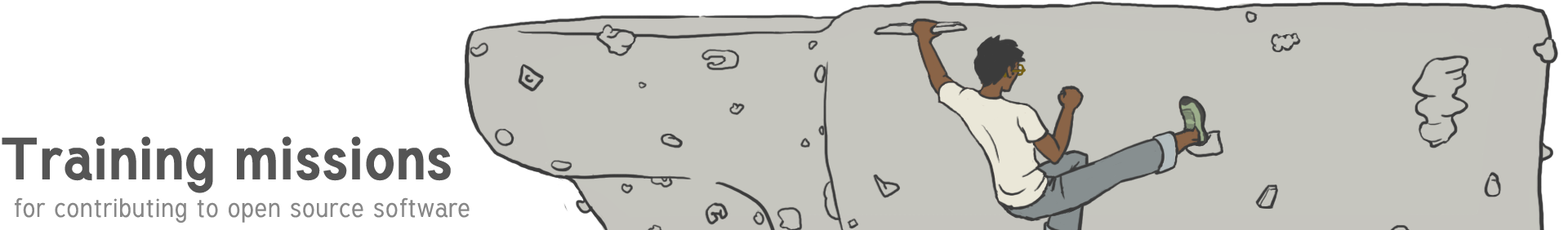
<style>
.page{position:relative;width:1568px;height:230px;background:#c6c6bf}
.page>*{position:absolute;margin:0}
.t1{font:58.8px "Tuffy-Bold";color:#555555}
.t2{font:26.1px "Tuffy";color:#888888}
</style>
<div class="page">
<p class="t1" style="left:2px;top:136px;width:449px;height:58px">Training missions</p>
<p class="t2" style="left:15px;top:198px;width:455px;height:26px">for contributing to open source software</p>
</div>
